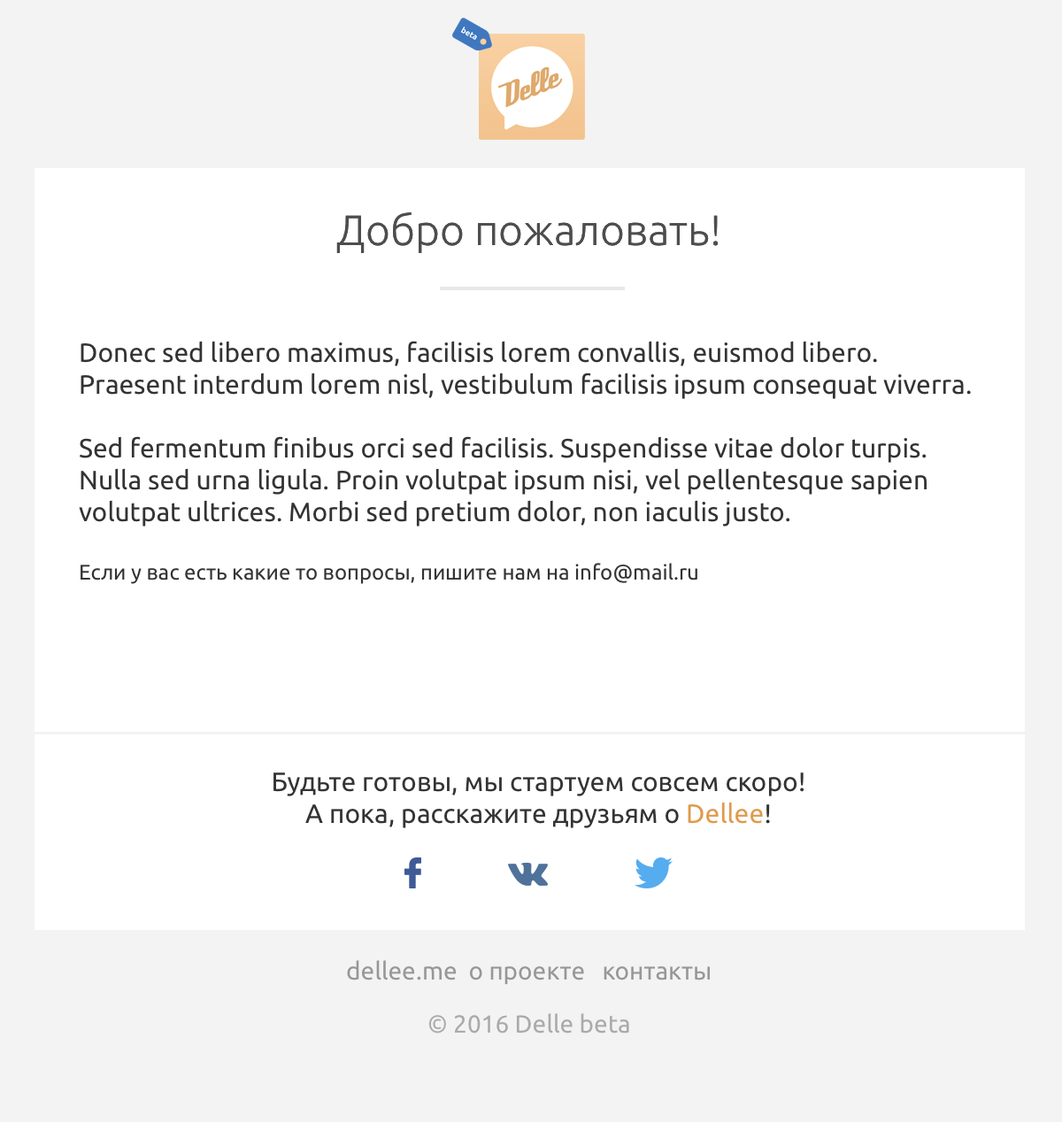
<style>
.page{position:relative;width:1062px;height:1122px;background:#ffffff}
.page>*{position:absolute;margin:0}
.t1{font:42.5px "Ubuntu-Light";color:#4d4d4d}
.t2{font:26.6px "Ubuntu";color:#333333}
.t3{font:21.2px "Ubuntu";color:#333333}
.t4{font:26.6px "Ubuntu";color:#e09a4b}
.t5{font:24.8px "Ubuntu";color:#979797}
.t6{font:24.8px "Ubuntu";color:#abaaaa}
</style>
<div class="page">
<p class="t1" style="left:336px;top:212px;width:383px;height:41px">Добро пожаловать!</p>
<p class="t1" style="left:336px;top:212px;width:383px;height:41px">Добро пожаловать!</p>
<p class="t2" style="left:79px;top:341px;width:892px;height:186px">Donec sed libero maximus, facilisis lorem convallis, euismod libero. Praesent interdum lorem nisl, vestibulum facilisis ipsum consequat viverra.<br><br>Sed fermentum finibus orci sed facilisis. Suspendisse vitae dolor turpis. Nulla sed urna ligula. Proin volutpat ipsum nisi, vel pellentesque sapien volutpat ultrices. Morbi sed pretium dolor, non iaculis justo.</p>
<p class="t3" style="left:81px;top:563px;width:617px;height:21px">Если у вас есть какие то вопросы, пишите нам на info@mail.ru</p>
<p class="t2" style="left:274px;top:773px;width:531px;height:56px;text-align:center">Будьте готовы, мы стартуем совсем скоро! <br>А пока, расскажите друзьям о <span class="t4">Dellee</span>!</p>
<p class="t5" style="left:347px;top:960px;width:363px;height:25px">dellee.me  о проекте   контакты</p>
<p class="t6" style="left:428px;top:1014px;width:201px;height:20px">© 2016 Delle beta</p>
</div>
